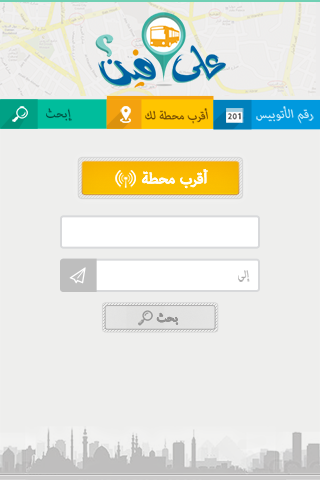
<style>
.page{position:relative;width:320px;height:480px;background:#eeeeed}
.page>*{position:absolute;margin:0}
.t1{font:16px "Arial-BlackItalic";letter-spacing:0.025em;color:#014f41}
.t2{font:16px "Arial-BlackItalic";color:#714a03}
.t3{font:17.2px "Arial-BlackItalic";color:#caecfb}
.t4{font:21.3px "AdobeArabic-Regular";color:#ffffff}
.t5{font:15.6px "Arial-BlackItalic";color:#abaaaa;scale:0.88 1}
.t6{font:15.7px "Arial-BlackItalic";color:#8f8e8d}
</style>
<div class="page">
<p class="t1" style="left:46px;top:108px;width:26px;height:13px">إبحث</p>
<p class="t2" style="left:145px;top:108px;width:63px;height:16px">أقرب محطة لك</p>
<p class="t2" style="left:145px;top:108px;width:63px;height:16px">أقرب محطة لك</p>
<p class="t3" style="left:256px;top:106px;width:58px;height:18px">رقم الأتوبيس</p>
<p class="t4" style="left:142px;top:169px;width:66px;height:19px">أقرب محطة</p>
<p class="t5" style="left:238px;top:270px;width:12px;height:12px">إلى</p>
<p class="t6" style="left:157px;top:313px;width:21px;height:12px">بحث</p>
</div>
